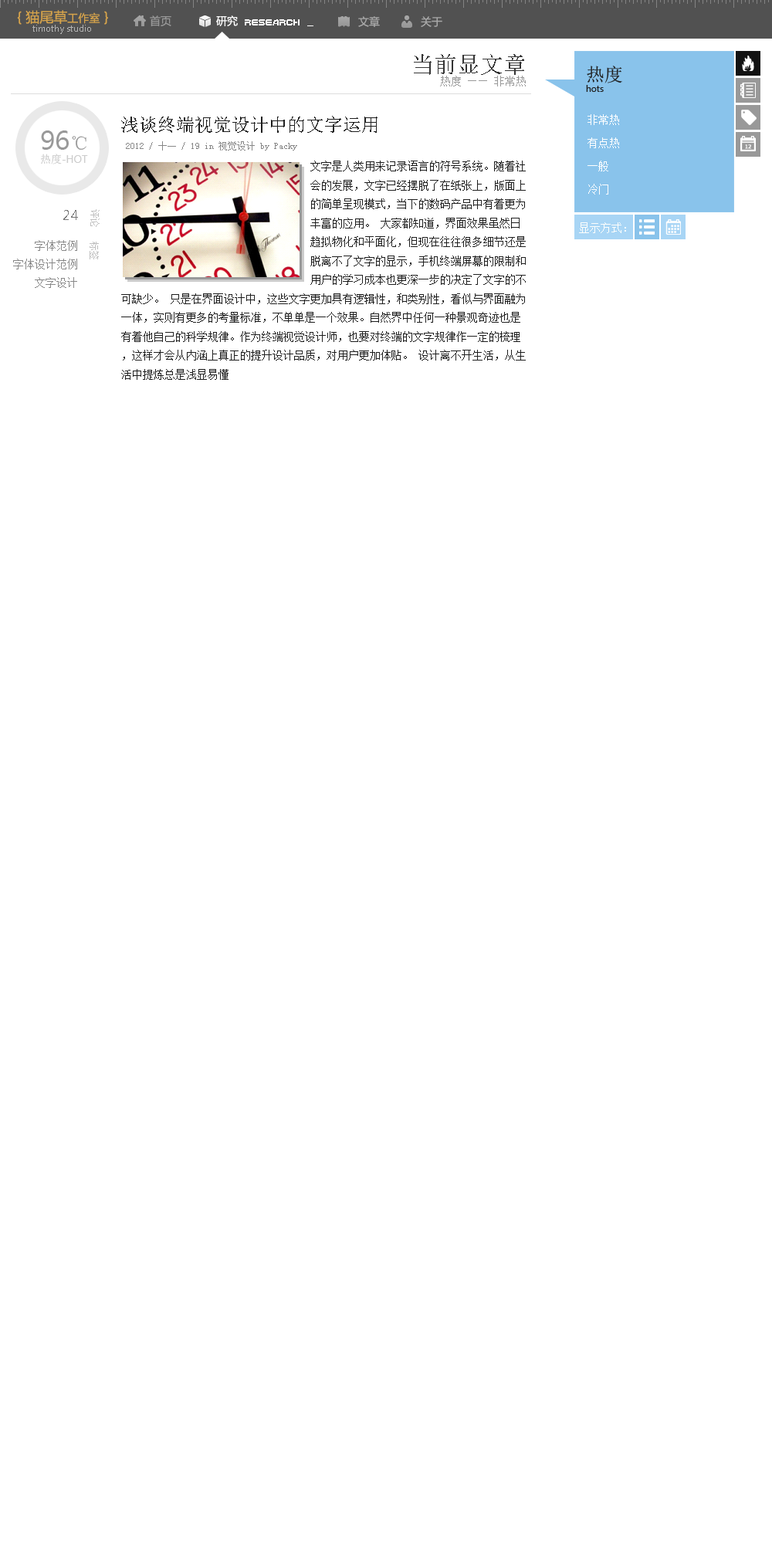
<style>
.page{position:relative;width:772px;height:1544px;background:#ffffff}
.page>*{position:absolute;margin:0}
.t1{font:13.9px "MicrosoftYaHei";color:#d6a34b}
.t2{font:10.8px "MicrosoftYaHei";color:#d6a34b}
.t3{font:10.8px "MicrosoftYaHei";color:#989898}
.t4{font:10.8px "MicrosoftYaHei";color:#ffffff}
.t5{font:10.8px "MicrosoftYaHei";color:#a8a8a8}
.t6{font:9.3px "Ebrima";color:#b3b3b3}
.t7{font:9.3px "Bordersprite";color:#ffffff}
.t8{font:10.8px/23.2px "SimSun";color:#999999}
.t9{font:23.2px/23.2px "SimSun";color:#343434}
.t10{font:9.3px/18.5px "Ebrima";color:#1e1e1e}
.t11{font:18.5px/18.5px "SimSun";color:#1e1e1e}
.t12{font:18.5px "SimSun";color:#1e1e1e}
.t13{font:10.8px/23.2px "SimSun";color:#ffffff}
.t14{font:10.8px/27.8px "Ebrima";color:#cccccc}
.t15{font:27.8px/27.8px "Ebrima";color:#999999}
.t16{font:18.5px/27.8px "SimSun";color:#999999}
.t17{font:10.8px/27.8px "SimSun";color:#cccccc}
.t18{font:9.3px "SimSun";color:#888888}
.t19{font:10.8px "SimSun";color:#1e1e1e}
.t20{font:9.3px "SimSun";color:#bfbfbf}
.t21{font:13.9px "Ebrima";color:#777777}
.t22{font:10.8px "SimSun";color:#fffffc}
.t23{font:10.8px/18.5px "SimSun";color:#888888}
</style>
<div class="page">
<p class="t1" style="left:17px;top:10px;width:91px;height:15px">{ 猫尾草<span class="t2">工作室</span> }</p>
<p class="t3" style="left:150px;top:15px;width:21px;height:11px">首页</p>
<p class="t4" style="left:216px;top:15px;width:22px;height:11px">研究</p>
<p class="t5" style="left:358px;top:16px;width:22px;height:11px">文章</p>
<p class="t5" style="left:421px;top:16px;width:21px;height:11px">关于</p>
<p class="t6" style="left:32px;top:25px;width:59px;height:9px">timothy studio</p>
<p class="t7" style="left:245px;top:19px;width:68px;height:7px">research _</p>
<p class="t8" style="left:414px;top:54px;width:112px;height:32px;text-align:right"><span class="t9">当前显文章<br></span>热度 —— 非常热</p>
<p class="t10" style="left:586px;top:66px;width:36px;height:26px"><span class="t11">热度<br></span>hots</p>
<p class="t12" style="left:121px;top:116px;width:257px;height:17px">浅谈终端视觉设计中的文字运用</p>
<p class="t13" style="left:588px;top:114px;width:31px;height:81px">非常热<br>有点热<br>一般<br>冷门</p>
<p class="t14" style="left:40px;top:130px;width:48px;height:34px"><span class="t15">96</span><span class="t16">℃<br></span><span class="t17">热度</span>-HOT</p>
<p class="t18" style="left:126px;top:141px;width:171px;height:10px">2012 / 十一 / 19 in 视觉设计 by Packy</p>
<p class="t19" style="left:121px;top:161px;width:405px;height:219px">文字是人类用来记录语言的符号系统。随着社<br>                                   会的发展，文字已经摆脱了在纸张上，版面上<br>                                   的简单呈现模式，当下的数码产品中有着更为<br>                                   丰富的应用。 大家都知道，界面效果虽然日<br>                                   趋拟物化和平面化，但现在往往很多细节还是<br>                                   脱离不了文字的显示，手机终端屏幕的限制和<br>                                   用户的学习成本也更深一步的决定了文字的不可缺少。 只是在界面设计中，这些文字更加具有逻辑性，和类别性，看似与界面融为一体，实则有更多的考量标准，不单单是一个效果。自然界中任何一种景观奇迹也是有着他自己的科学规律。作为终端视觉设计师，也要对终端的文字规律作一定的梳理，这样才会从内涵上真正的提升设计品质，对用户更加体贴。 设计离不开生活，从生活中提炼总是浅显易懂</p>
<p class="t20" style="left:90px;top:209px;width:10px;height:18px;rotate:90deg">评论</p>
<p class="t21" style="left:63px;top:210px;width:15px;height:10px">24</p>
<p class="t22" style="left:579px;top:222px;width:47px;height:11px">显示方式：</p>
<p class="t23" style="left:13px;top:240px;width:64px;height:48px;text-align:right">字体范例<br>字体设计范例<br>文字设计</p>
<p class="t20" style="left:90px;top:242px;width:9px;height:17px;rotate:90deg">标签</p>
</div>
